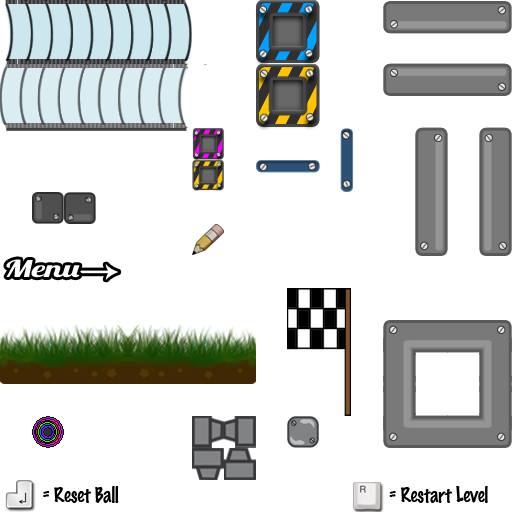
<style>
.page{position:relative;width:512px;height:512px;background:#ffffff}
.page>*{position:absolute;margin:0}
.t1{font:23.1px "Lobster";letter-spacing:-0.01em;color:#ffffff;scale:1.54 1}
.t2{font:19px "MarkerFelt-Thin";letter-spacing:-0.01em;color:#000000;scale:0.95 1}
</style>
<div class="page">
<p class="t1" style="left:6px;top:259px;width:74px;height:19px">Menu</p>
<p class="t2" style="left:43px;top:486px;width:76px;height:17px">= Reset Ball</p>
<p class="t2" style="left:389px;top:486px;width:99px;height:17px">= Restart Level</p>
</div>
